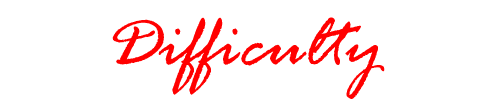
<style>
.page{position:relative;width:500px;height:100px;background:#ffffff}
.page>*{position:absolute;margin:0}
.t1{font:78px "RageItalic";color:#ff0000}
</style>
<div class="page">
<p class="t1" style="left:112px;top:17px;width:273px;height:82px">Difficulty</p>
</div>
